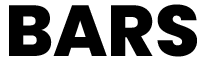
<style>
.page{position:relative;width:206px;height:60px;background:#000000}
.page>*{position:absolute;margin:0}
.t1{font:72px "Poppins-ExtraBold";color:#000000}
</style>
<div class="page">
<p class="t1" style="left:9px;top:4px;width:188px;height:53px">BARS</p>
</div>
